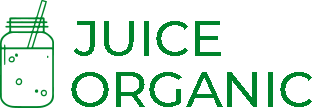
<style>
.page{position:relative;width:316px;height:108px;background:#ffffff}
.page>*{position:absolute;margin:0}
.t1{font:50px "Montserrat-Medium";color:#00842b}
</style>
<div class="page">
<p class="t1" style="left:74px;top:21px;width:147px;height:35px">JUICE</p>
<p class="t1" style="left:71px;top:72px;width:241px;height:35px">ORGANIC</p>
</div>
